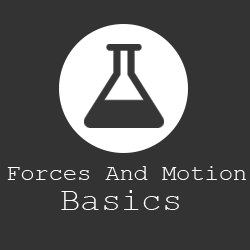
<style>
.page{position:relative;width:250px;height:250px;background:#333333}
.page>*{position:absolute;margin:0}
.t1{font:23.2px "CourierNewPSMT";color:#fefefe}
.t2{font:32.8px "CourierNewPSMT";color:#fefefe;scale:1.03 1}
</style>
<div class="page">
<p class="t1" style="left:7px;top:166px;width:239px;height:14px">Forces And Motion</p>
<p class="t2" style="left:61px;top:190px;width:118px;height:20px">Basics</p>
</div>
